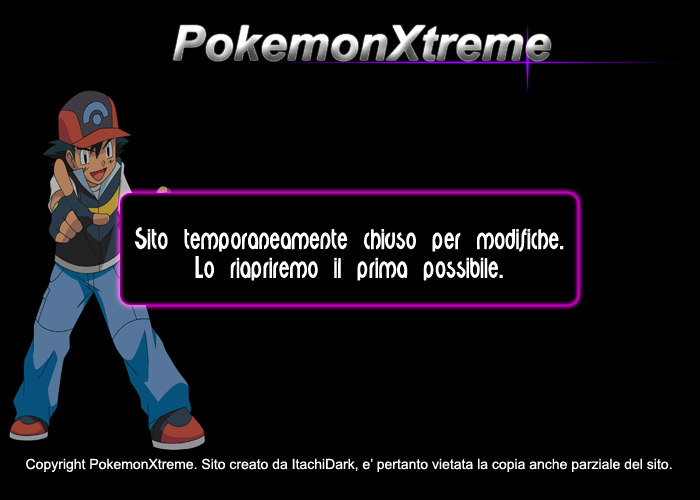
<style>
.page{position:relative;width:700px;height:500px;background:#000000}
.page>*{position:absolute;margin:0}
.t1{font:48px "Arial-BoldItalicMT"}
.t2{font:24px "Minerva";color:#ffffff}
.t3{font:14px "ArialMT";color:#ffffff}
</style>
<div class="page">
<p class="t1" style="left:173px;top:25px;width:378px;height:36px">PokemonXtreme</p>
<p class="t2" style="left:134px;top:227px;width:430px;height:54px;text-align:center">Sito temporaneamente chiuso per modifiche.<br>Lo riapriremo il prima possibile.</p>
<p class="t3" style="left:26px;top:458px;width:646px;height:14px">Copyright PokemonXtreme. Sito creato da ItachiDark, e’ pertanto vietata la copia anche parziale del sito.</p>
</div>
